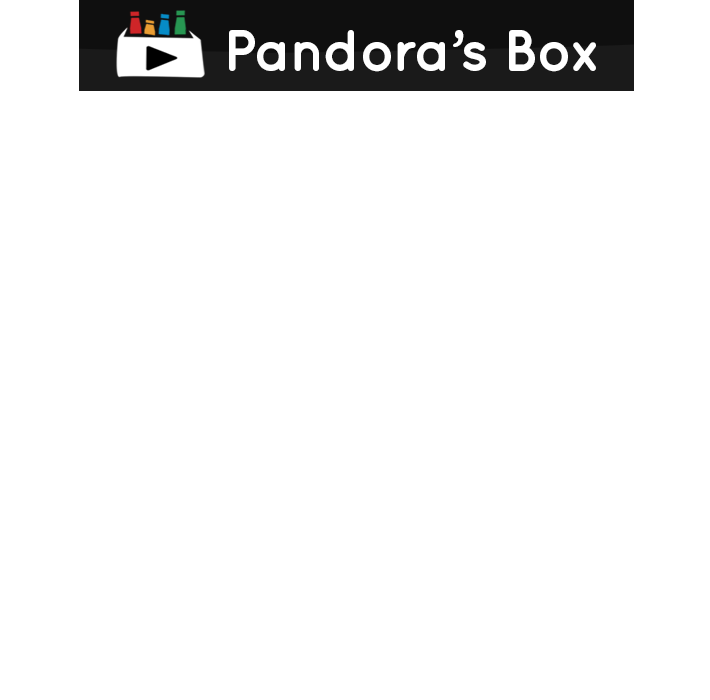
<style>
.page{position:relative;width:710px;height:700px;background:#ffffff}
.page>*{position:absolute;margin:0}
.t1{font:58.1px "Quicksand-Bold";letter-spacing:-0.025em;color:#ffffff}
</style>
<div class="page">
<p class="t1" style="left:229px;top:30px;width:367px;height:42px">Pandora’s Box</p>
</div>
